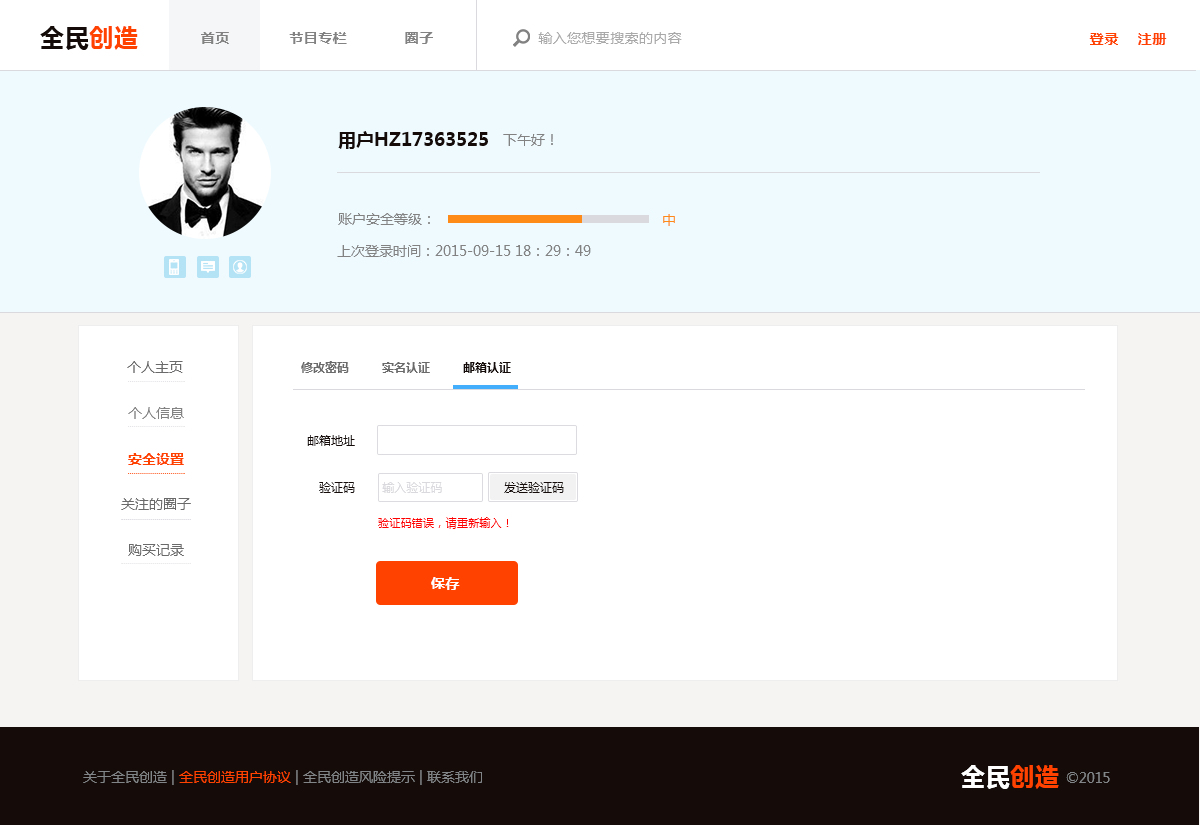
<style>
.page{position:relative;width:1200px;height:825px;background:#ffffff}
.page>*{position:absolute;margin:0}
.t1{font:24px "MicrosoftYaHei-Bold";letter-spacing:0.025em;color:#150b09}
.t2{font:24px "MicrosoftYaHei-Bold";letter-spacing:0.025em;color:#ff4200}
.t3{font:14px "MicrosoftYaHei-Bold";letter-spacing:0.025em;color:#828282}
.t4{font:14px "MicrosoftYaHei";letter-spacing:0.025em;color:#a9a9a9}
.t5{font:14px "MicrosoftYaHei-Bold";letter-spacing:0.05em;color:#ff4200}
.t6{font:18px "MicrosoftYaHei-Bold";color:#150b09}
.t7{font:14px "MicrosoftYaHei";color:#828282}
.t8{font:14px "MicrosoftYaHei";color:#fe8a18}
.t9{font:14px "MicrosoftYaHei";color:#6a6a6a}
.t10{font:12px "MicrosoftYaHei-Bold";color:#6a6a6a}
.t11{font:12px "MicrosoftYaHei-Bold";color:#150b09}
.t12{font:14px "MicrosoftYaHei";color:#838383}
.t13{font:12px "MicrosoftYaHei";color:#150b09}
.t14{font:14px "MicrosoftYaHei-Bold";color:#ff4200}
.t15{font:12px "MicrosoftYaHei";color:#d9d9de}
.t16{font:11px "MicrosoftYaHei";letter-spacing:0.025em;color:#ff0000}
.t17{font:14px "MicrosoftYaHei-Bold";letter-spacing:0.025em;color:#ffffff}
.t18{font:14px "MicrosoftYaHei";color:#828587}
.t19{font:14px "MicrosoftYaHei";color:#ff4200}
.t20{font:24px "MicrosoftYaHei-Bold";letter-spacing:0.025em;color:#ffffff}
</style>
<div class="page">
<p class="t1" style="left:40px;top:26px;width:98px;height:24px">全民<span class="t2">创造</span></p>
<p class="t3" style="left:201px;top:32px;width:28px;height:12px">首页</p>
<p class="t3" style="left:289px;top:32px;width:58px;height:12px">节目专栏</p>
<p class="t3" style="left:405px;top:32px;width:28px;height:12px">圈子</p>
<p class="t4" style="left:538px;top:32px;width:144px;height:12px">输入您想要搜索的内容</p>
<p class="t5" style="left:1089px;top:33px;width:30px;height:12px">登录</p>
<p class="t5" style="left:1138px;top:33px;width:29px;height:12px">注册</p>
<p class="t6" style="left:338px;top:131px;width:150px;height:18px">用户HZ17363525</p>
<p class="t7" style="left:503px;top:134px;width:50px;height:12px">下午好！</p>
<p class="t7" style="left:338px;top:213px;width:92px;height:12px">账户安全等级：</p>
<p class="t8" style="left:663px;top:214px;width:12px;height:12px">中</p>
<p class="t7" style="left:337px;top:245px;width:254px;height:12px">上次登录时间：2015-09-15 18：29：49</p>
<p class="t9" style="left:127px;top:361px;width:56px;height:12px">个人主页</p>
<p class="t10" style="left:301px;top:361px;width:48px;height:12px">修改密码</p>
<p class="t10" style="left:382px;top:362px;width:48px;height:11px">实名认证</p>
<p class="t11" style="left:463px;top:362px;width:48px;height:11px">邮箱认证</p>
<p class="t12" style="left:128px;top:407px;width:56px;height:12px">个人信息</p>
<p class="t13" style="left:307px;top:435px;width:48px;height:11px">邮箱地址</p>
<p class="t14" style="left:128px;top:453px;width:56px;height:12px">安全设置</p>
<p class="t13" style="left:319px;top:482px;width:36px;height:11px">验证码</p>
<p class="t15" style="left:382px;top:482px;width:60px;height:11px">输入验证码</p>
<p class="t13" style="left:504px;top:482px;width:60px;height:11px">发送验证码</p>
<p class="t9" style="left:121px;top:498px;width:70px;height:12px">关注的圈子</p>
<p class="t16" style="left:378px;top:517px;width:131px;height:12px">验证码错误，请重新输入！</p>
<p class="t9" style="left:128px;top:544px;width:56px;height:12px">购买记录</p>
<p class="t17" style="left:431px;top:577px;width:29px;height:13px">保存</p>
<p class="t18" style="left:83px;top:770px;width:399px;height:15px">关于全民创造 | <span class="t19">全民创造用户协议</span> | 全民创造风险提示 | 联系我们</p>
<p class="t20" style="left:961px;top:765px;width:98px;height:24px">全民<span class="t2">创造</span></p>
<p class="t18" style="left:1066px;top:772px;width:44px;height:11px">©2015</p>
</div>
